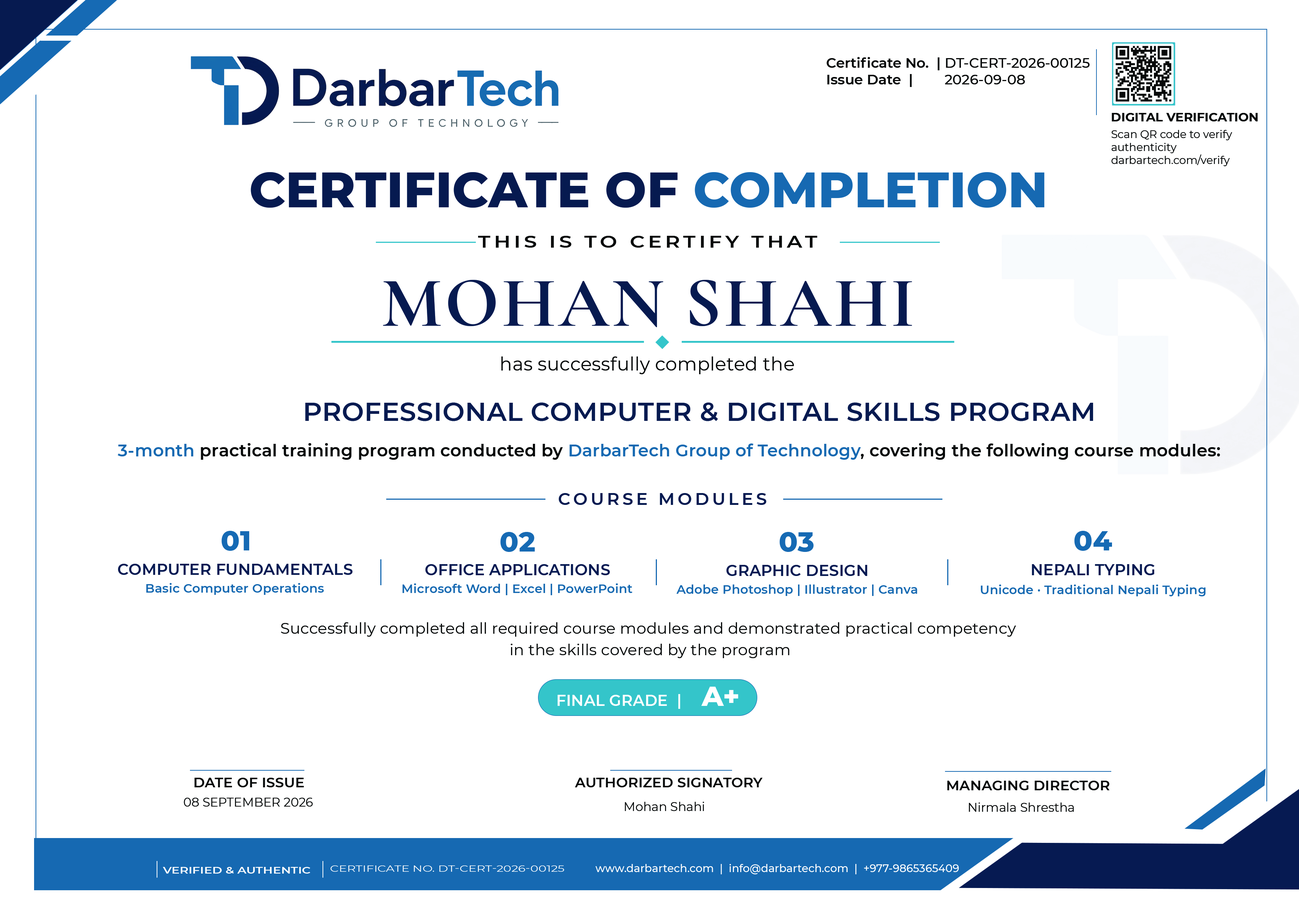
<style>
.page{position:relative;width:1299px;height:918px;background:#ffffff}
.page>*{position:absolute;margin:0}
.t1{font:13.9px "Montserrat-SemiBold";color:#060808}
.t2{font:13.9px "Montserrat-Medium";color:#060808}
.t3{font:12.3px "Montserrat-Bold";color:#060808}
.t4{font:10.8px "Montserrat-Regular";color:#060808}
.t5{font:49.4px "Montserrat-ExtraBold";letter-spacing:0.003em;color:#061a50;text-transform:uppercase}
.t6{font:49.4px "Montserrat-ExtraBold";letter-spacing:0.003em;color:#1669b2;text-transform:uppercase}
.t7{font:17px "Montserrat-SemiBold";letter-spacing:0.17em;color:#060808;text-transform:uppercase;scale:1.2 1}
.t8{font:71px "CormorantGaramond-Bold";letter-spacing:0.025em;color:#061a50;text-transform:uppercase}
.t9{font:18.5px "Montserrat-Regular";letter-spacing:0.01em;color:#060808}
.t10{font:26.2px "Montserrat-SemiBold";letter-spacing:0.018em;color:#061a50}
.t11{font:17px "Montserrat-SemiBold";letter-spacing:0.01em;color:#060808}
.t12{font:17px "Montserrat-SemiBold";letter-spacing:0.01em;color:#1669b2}
.t13{font:17px "Montserrat-SemiBold";letter-spacing:0.18em;color:#061a50}
.t14{font:27.8px "Montserrat-ExtraBold";letter-spacing:0.01em;color:#166ab4}
.t15{font:15.4px "Montserrat-SemiBold";letter-spacing:0.01em;color:#061a52}
.t16{font:12.3px "Montserrat-SemiBold";letter-spacing:0.01em;color:#1669b2}
.t17{font:15.4px/21.6px "Montserrat-Regular";letter-spacing:0.01em;color:#060808}
.t18{font:15.4px "Montserrat-SemiBold";letter-spacing:0.01em;color:#ffffff;text-transform:uppercase}
.t19{font:27.8px "Montserrat-ExtraBold";letter-spacing:0.01em;color:#ffffff;text-transform:uppercase}
.t20{font:13.9px "Montserrat-SemiBold";letter-spacing:0.01em;color:#060808;text-transform:uppercase}
.t21{font:12.3px "Montserrat-Regular";color:#060808;text-transform:uppercase}
.t22{font:12.3px "Montserrat-Regular";color:#060808}
.t23{font:9.3px "Montserrat-SemiBold";color:#ffffff;text-transform:uppercase;scale:1.31 1}
.t24{font:9.3px "Montserrat-Regular";color:#ffffff;text-transform:uppercase;scale:1.31 1}
.t25{font:10.8px "Montserrat-Medium";color:#ffffff}
</style>
<div class="page">
<p class="t1" style="left:826px;top:57px;width:113px;height:30px">Certificate No.  |<br>Issue Date  |</p>
<p class="t2" style="left:944px;top:58px;width:146px;height:26px">DT-CERT-2026-00125<br>2026-09-08</p>
<p class="t3" style="left:1111px;top:113px;width:147px;height:8px">DIGITAL VERIFICATION</p>
<p class="t4" style="left:1111px;top:130px;width:121px;height:36px">Scan QR code to verify authenticity<br>darbartech.com/verify</p>
<p class="t5" style="left:251px;top:172px;width:793px;height:36px">Certificate of <span class="t6">completion</span></p>
<p class="t7" style="left:478px;top:236px;width:339px;height:12px">This is to certify that</p>
<p class="t8" style="left:383px;top:280px;width:529px;height:47px">MOHAN SHAHI</p>
<p class="t9" style="left:501px;top:357px;width:293px;height:17px">has successfully completed the</p>
<p class="t10" style="left:305px;top:402px;width:788px;height:19px">PROFESSIONAL COMPUTER &amp; DIGITAL SKILLS PROGRAM</p>
<p class="t11" style="left:118px;top:443px;width:1102px;height:17px"><span class="t12">3-month </span>practical training program conducted by <span class="t12">DarbarTech Group of Technology</span>, covering the following course modules:</p>
<p class="t13" style="left:559px;top:493px;width:207px;height:12px">COURSE MODULES</p>
<p class="t14" style="left:221px;top:531px;width:28px;height:20px">01</p>
<p class="t14" style="left:500px;top:532px;width:35px;height:20px">02</p>
<p class="t14" style="left:779px;top:532px;width:34px;height:20px">03</p>
<p class="t14" style="left:1074px;top:531px;width:38px;height:20px">04</p>
<p class="t15" style="left:118px;top:564px;width:234px;height:11px">COMPUTER FUNDAMENTALS</p>
<p class="t15" style="left:425px;top:564px;width:185px;height:11px">OFFICE APPLICATIONS</p>
<p class="t15" style="left:726px;top:565px;width:141px;height:11px">GRAPHIC DESIGN</p>
<p class="t15" style="left:1031px;top:564px;width:123px;height:11px">NEPALI TYPING</p>
<p class="t16" style="left:146px;top:583px;width:178px;height:12px">Basic Computer Operations</p>
<p class="t16" style="left:402px;top:583px;width:230px;height:12px">Microsoft Word | Excel | PowerPoint</p>
<p class="t16" style="left:676px;top:585px;width:241px;height:11px">Adobe Photoshop | Illustrator | Canva</p>
<p class="t16" style="left:980px;top:585px;width:225px;height:11px">Unicode · Traditional Nepali Typing</p>
<p class="t17" style="left:281px;top:622px;width:735px;height:36px;text-align:center">Successfully completed all required course modules and demonstrated practical competency <br>in the skills covered by the program</p>
<p class="t18" style="left:557px;top:687px;width:181px;height:22px">Final Grade  |   <span class="t19">a+</span></p>
<p class="t20" style="left:194px;top:778px;width:110px;height:9px">Date of issue</p>
<p class="t20" style="left:575px;top:778px;width:188px;height:9px">AUTHORIZED SIGNATORY</p>
<p class="t20" style="left:947px;top:781px;width:162px;height:9px">Managing director</p>
<p class="t21" style="left:184px;top:798px;width:129px;height:9px">08 September 2026</p>
<p class="t22" style="left:625px;top:802px;width:79px;height:9px">Mohan Shahi</p>
<p class="t22" style="left:968px;top:803px;width:106px;height:9px">Nirmala Shrestha</p>
<p class="t23" style="left:163px;top:867px;width:147px;height:7px">Verified &amp; Authentic</p>
<p class="t24" style="left:330px;top:866px;width:234px;height:6px">CERTIFICATE NO. DT-CERT-2026-00125</p>
<p class="t25" style="left:595px;top:864px;width:364px;height:10px">www.darbartech.com  |  info@darbartech.com  |  +977-9865365409</p>
</div>
